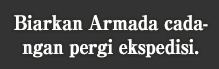
<style>
.page{position:relative;width:219px;height:69px;background:#333333}
.page>*{position:absolute;margin:0}
.t1{font:20px/24px "RyuminPro-ExBold";letter-spacing:-0.04em;color:#ffffff;font-weight:bold;scale:0.9 1}
</style>
<div class="page">
<p class="t1" style="left:14px;top:15px;width:194px;height:43px;text-align:center">Biarkan Armada cada-<br>ngan pergi ekspedisi.</p>
</div>
